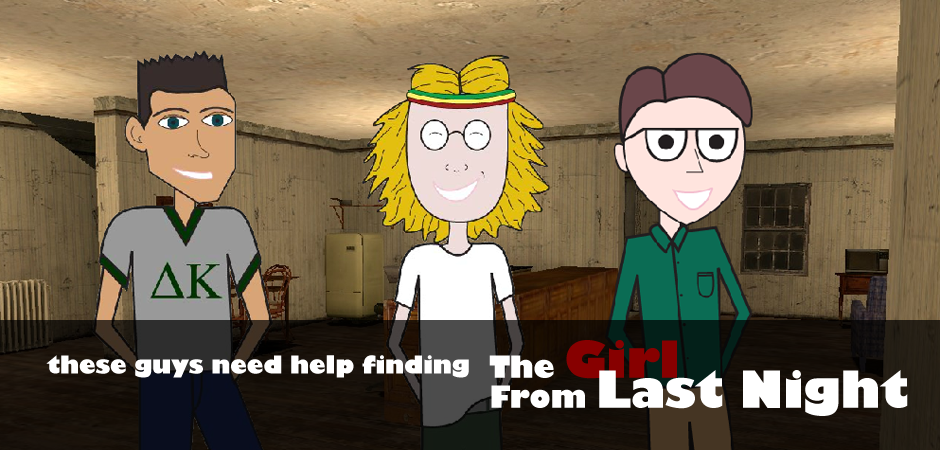
<style>
.page{position:relative;width:940px;height:450px}
.page>*{position:absolute;margin:0}
.t1{font:50px/30px "GillSans-UltraBold";letter-spacing:-0.01em;color:#ffffff}
.t2{font:30px/30px "GillSans-UltraBold";letter-spacing:-0.01em;color:#ffffff}
.t3{font:50px/30px "GillSans-UltraBold";letter-spacing:-0.01em;color:#870000}
.t4{font:24px "GillSans-UltraBold";letter-spacing:-0.01em;color:#ffffff}
</style>
<div class="page">
<p class="t1" style="left:489px;top:340px;width:419px;height:76px"><span class="t2">The </span><span class="t3">Girl<br></span><span class="t2">From </span>Last Night</p>
<p class="t4" style="left:46px;top:355px;width:423px;height:23px">these guys need help finding</p>
</div>
